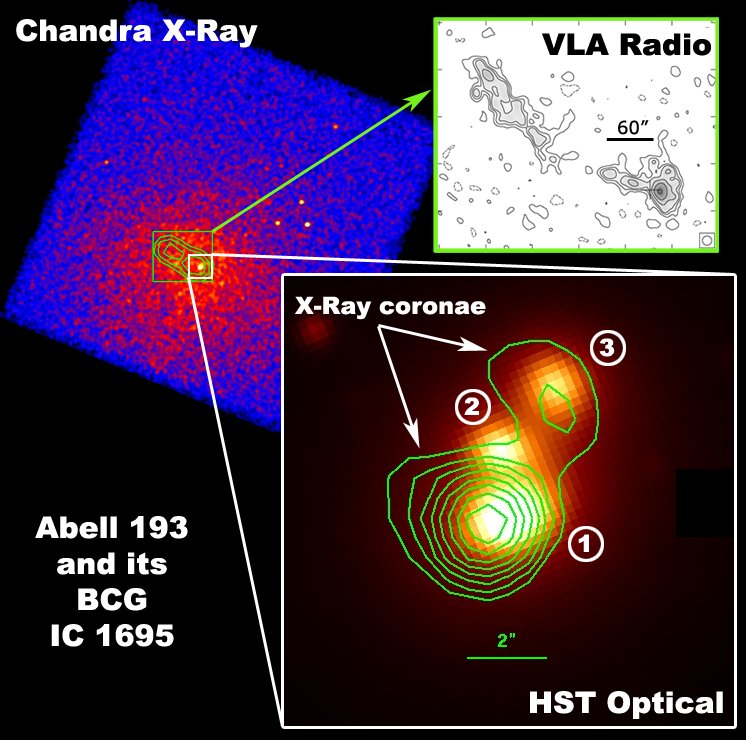
<style>
.page{position:relative;width:746px;height:740px;background:#000000}
.page>*{position:absolute;margin:0}
.t1{font:30px "Arial-Black";color:#ffffff}
.t2{font:30px "Arial-Black";color:#000000}
.t3{font:24px "Arial-Black";color:#ffffff}
</style>
<div class="page">
<p class="t1" style="left:16px;top:19px;width:242px;height:29px">Chandra X-Ray</p>
<p class="t2" style="left:542px;top:33px;width:169px;height:23px">VLA Radio</p>
<p class="t3" style="left:295px;top:296px;width:191px;height:24px">X-Ray coronae</p>
<p class="t1" style="left:35px;top:516px;width:153px;height:131px;text-align:center">Abell 193<br>and its<br>BCG<br>IC 1695</p>
<p class="t1" style="left:530px;top:691px;width:193px;height:28px">HST Optical</p>
</div>
